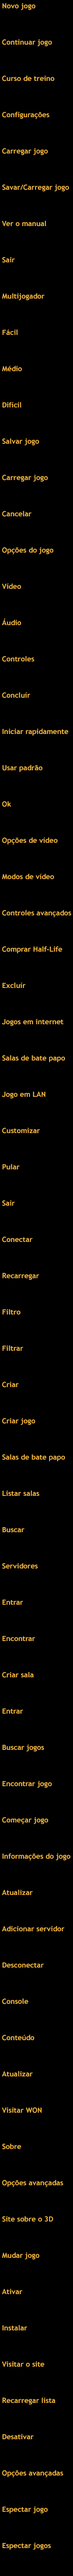
<style>
.page{position:relative;width:73px;height:2576px;background:#000000}
.page>*{position:absolute;margin:0}
.t1{font:7.2px/36.3px "TrebuchetMS-Bold";color:#f0b43f}
</style>
<div class="page">
<p class="t1" style="left:2px;top:3px;width:69px;height:2547px">Novo jogo<br>Continuar jogo<br>Curso de treino<br>Configurações<br>Carregar jogo<br>Savar/Carregar jogo<br>Ver o manual<br>Sair<br>Multijogador<br>Fácil<br>Médio<br>Difícil<br>Salvar jogo<br>Carregar jogo<br>Cancelar<br>Opções do jogo<br>Vídeo<br>Áudio<br>Controles<br>Concluír<br>Iniciar rapidamente<br>Usar padrão<br>Ok<br>Opções de vídeo<br>Modos de vídeo<br>Controles avançados<br>Comprar Half-Life<br>Excluír<br>Jogos em internet<br>Salas de bate papo<br>Jogo em LAN<br>Customizar<br>Pular<br>Sair<br>Conectar<br>Recarregar<br>Filtro<br>Filtrar<br>Criar<br>Criar jogo<br>Salas de bate papo<br>Listar salas<br>Buscar<br>Servidores<br>Entrar<br>Encontrar<br>Criar sala<br>Entrar<br>Buscar jogos<br>Encontrar jogo<br>Começar jogo<br>Informações do jogo<br>Atualizar<br>Adicionar servidor<br>Desconectar<br>Console<br>Conteúdo<br>Atualizar<br>Visitar WON<br>Sobre<br>Opções avançadas<br>Site sobre o 3D<br>Mudar jogo<br>Ativar<br>Instalar<br>Visitar o site<br>Recarregar lista<br>Desativar<br>Opções avançadas<br>Espectar jogo<br>Espectar jogos</p>
</div>
